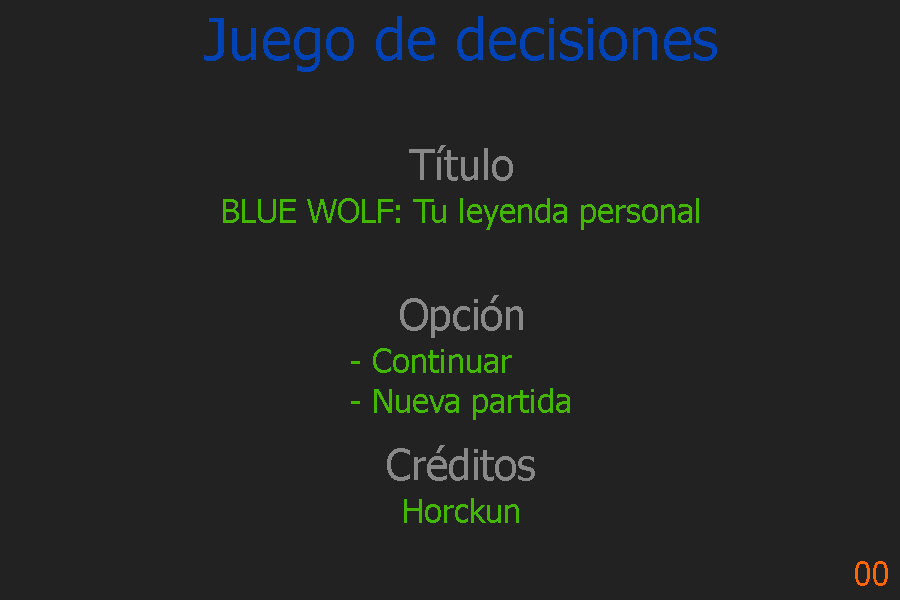
<style>
.page{position:relative;width:900px;height:600px;background:#222222}
.page>*{position:absolute;margin:0}
.t1{font:58.3px "Tahoma";color:#0043b6}
.t2{font:41.7px "Tahoma";color:#888888}
.t3{font:33.3px "Tahoma";color:#43b600}
.t4{font:33.3px "Tahoma";color:#ff6600}
</style>
<div class="page">
<p class="t1" style="left:204px;top:16px;width:513px;height:56px">Juego de decisiones</p>
<p class="t2" style="left:409px;top:145px;width:104px;height:36px">Título</p>
<p class="t3" style="left:223px;top:198px;width:476px;height:32px">BLUE WOLF: Tu leyenda personal</p>
<p class="t2" style="left:400px;top:295px;width:123px;height:43px">Opción</p>
<p class="t3" style="left:351px;top:348px;width:219px;height:72px">- Continuar<br>- Nueva partida</p>
<p class="t2" style="left:387px;top:445px;width:148px;height:36px">Créditos</p>
<p class="t3" style="left:404px;top:498px;width:115px;height:25px">Horckun</p>
<p class="t4" style="left:855px;top:561px;width:33px;height:25px">00</p>
</div>
